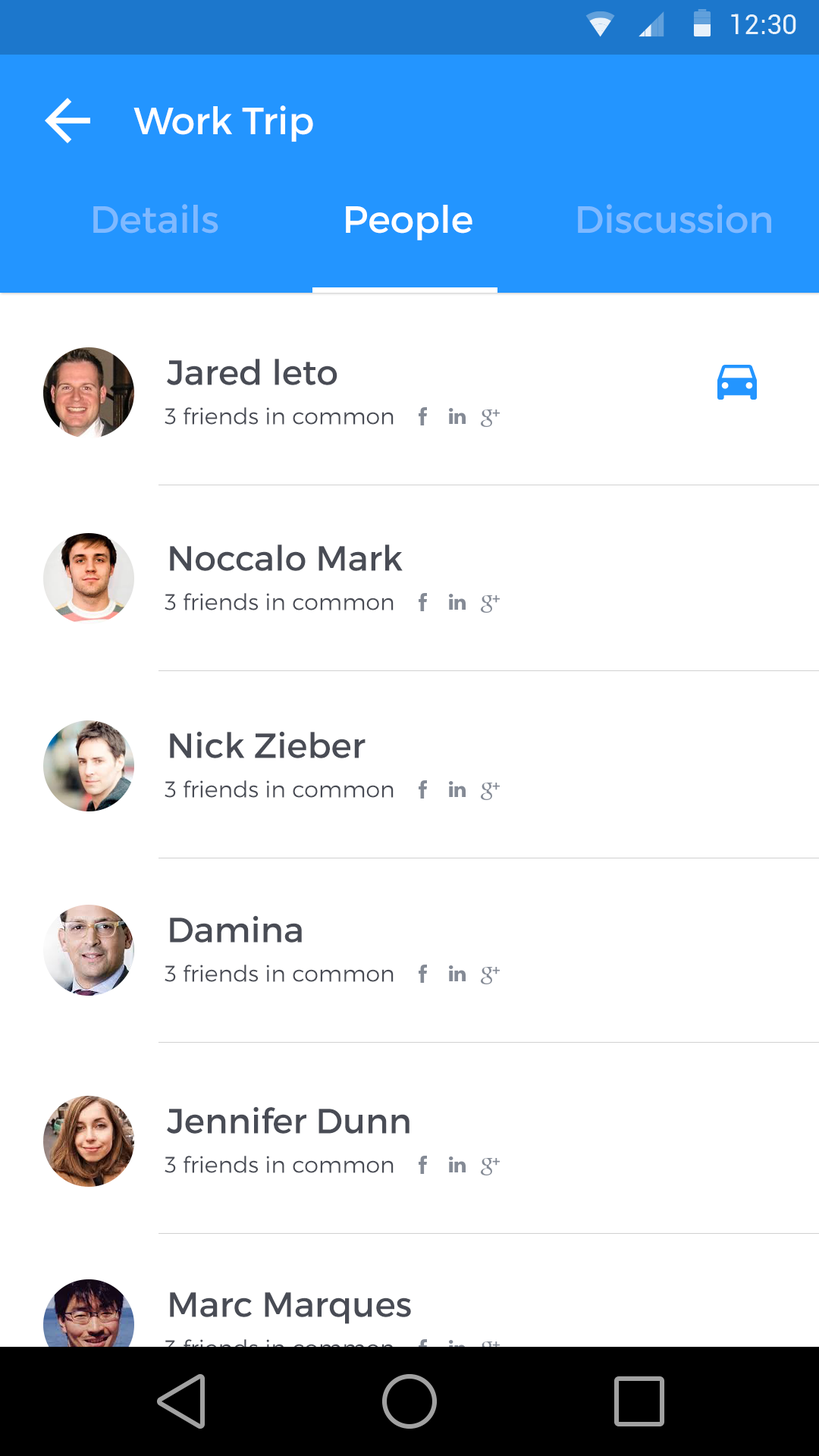
<style>
.page{position:relative;width:819px;height:1456px;background:#ffffff}
.page>*{position:absolute;margin:0}
.t1{font:37.9px "Montserrat-Regular";color:#ffffff}
.t2{font:37.9px "Montserrat-Regular";color:#7fb9ff}
.t3{font:34.9px "Montserrat-Regular";color:#494c55}
.t4{font:22.7px "Montserrat-Light";color:#494c55}
</style>
<div class="page">
<p class="t1" style="left:133px;top:105px;width:180px;height:37px">Work Trip</p>
<p class="t2" style="left:93px;top:204px;width:125px;height:30px">Details</p>
<p class="t1" style="left:346px;top:205px;width:126px;height:35px">People</p>
<p class="t2" style="left:578px;top:204px;width:193px;height:30px">Discussion</p>
<p class="t3" style="left:167px;top:359px;width:170px;height:26px">Jared leto</p>
<p class="t4" style="left:165px;top:407px;width:229px;height:18px">3 friends in common</p>
<p class="t3" style="left:170px;top:544px;width:233px;height:27px">Noccalo Mark</p>
<p class="t4" style="left:165px;top:593px;width:229px;height:17px">3 friends in common</p>
<p class="t3" style="left:170px;top:731px;width:196px;height:27px">Nick Zieber</p>
<p class="t4" style="left:165px;top:780px;width:229px;height:18px">3 friends in common</p>
<p class="t3" style="left:170px;top:915px;width:132px;height:28px">Damina</p>
<p class="t4" style="left:165px;top:965px;width:229px;height:17px">3 friends in common</p>
<p class="t3" style="left:167px;top:1106px;width:242px;height:28px">Jennifer Dunn</p>
<p class="t4" style="left:165px;top:1156px;width:229px;height:17px">3 friends in common</p>
<p class="t3" style="left:170px;top:1292px;width:241px;height:32px">Marc Marques</p>
</div>
